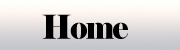
<style>
.page{position:relative;width:180px;height:50px}
.page>*{position:absolute;margin:0}
.t1{font:33px "Elephant-Regular";letter-spacing:-0.05em;color:#000000;scale:0.91 1}
</style>
<div class="page">
<p class="t1" style="left:42px;top:14px;width:86px;height:25px">Home</p>
</div>
